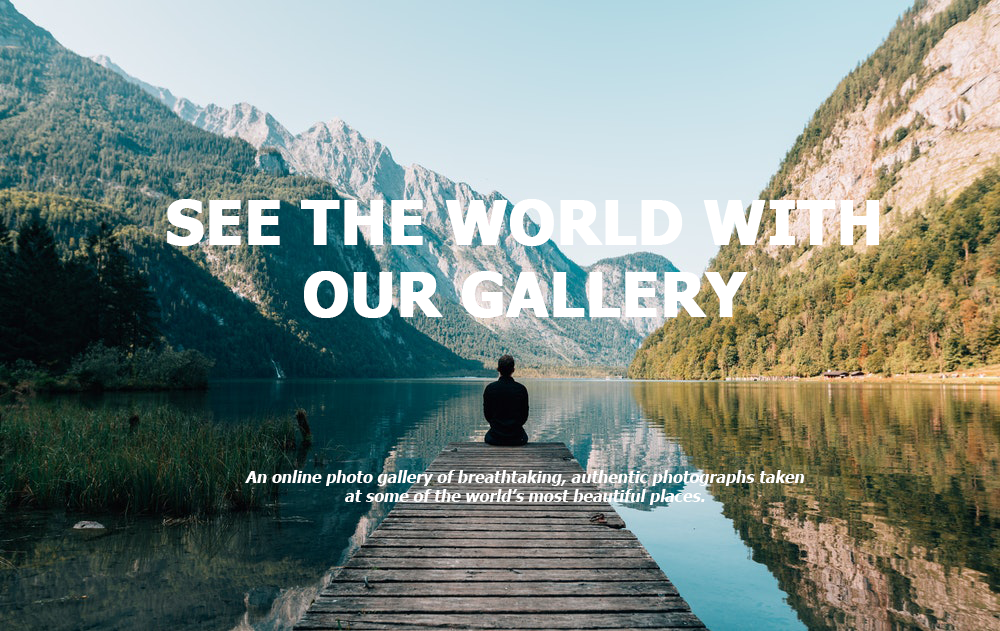
<style>
.page{position:relative;width:1000px;height:631px}
.page>*{position:absolute;margin:0}
.t1{font:60px "Tahoma-Bold";color:#ffffff;font-weight:bold}
.t2{font:16px "Tahoma-Bold";color:#ffffff;font-style:italic}
</style>
<div class="page">
<p class="t1" style="left:167px;top:199px;width:712px;height:119px;text-align:center">SEE THE WORLD WITH OUR GALLERY</p>
<p class="t2" style="left:245px;top:470px;width:559px;height:35px;text-align:center">An online photo gallery of breathtaking, authentic photographs taken at some of the world’s most beautiful places.</p>
</div>
